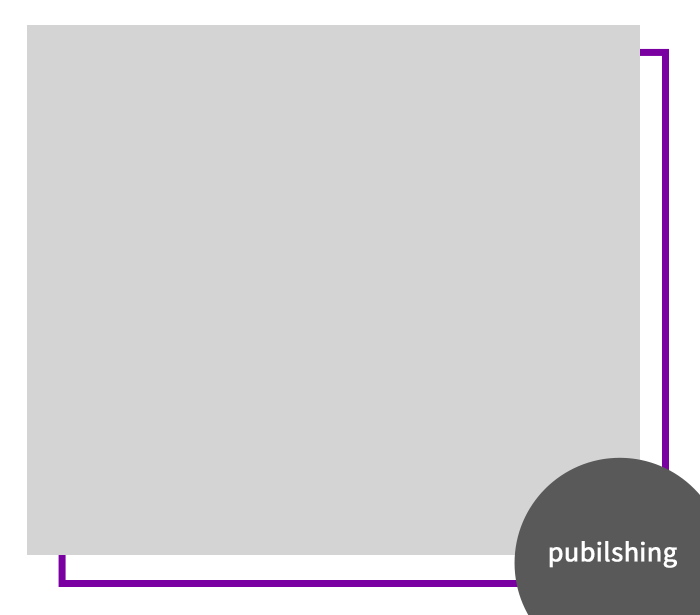
<style>
.page{position:relative;width:700px;height:615px;background:#d4d4d4}
.page>*{position:absolute;margin:0}
.t1{font:25px "NotoSansKR-Regular";color:#ffffff;font-weight:bold}
</style>
<div class="page">
<p class="t1" style="left:549px;top:541px;width:128px;height:27px">pubilshing</p>
</div>
